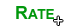
<style>
.page{position:relative;width:72px;height:28px;background:#ffffff}
.page>*{position:absolute;margin:0}
.t1{font:14px "Arial-BoldMT";color:#00970b}
.t2{font:18px "Arial-BoldMT";color:#00970b}
</style>
<div class="page">
<p class="t1" style="left:16px;top:6px;width:38px;height:13px"><span class="t2">R</span>ATE</p>
</div>
